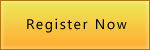
<style>
.page{position:relative;width:150px;height:50px}
.page>*{position:absolute;margin:0}
.t1{font:14px "SegoeUI";letter-spacing:0.12em;color:#000000}
</style>
<div class="page">
<p class="t1" style="left:27px;top:18px;width:100px;height:15px">Register Now</p>
</div>
